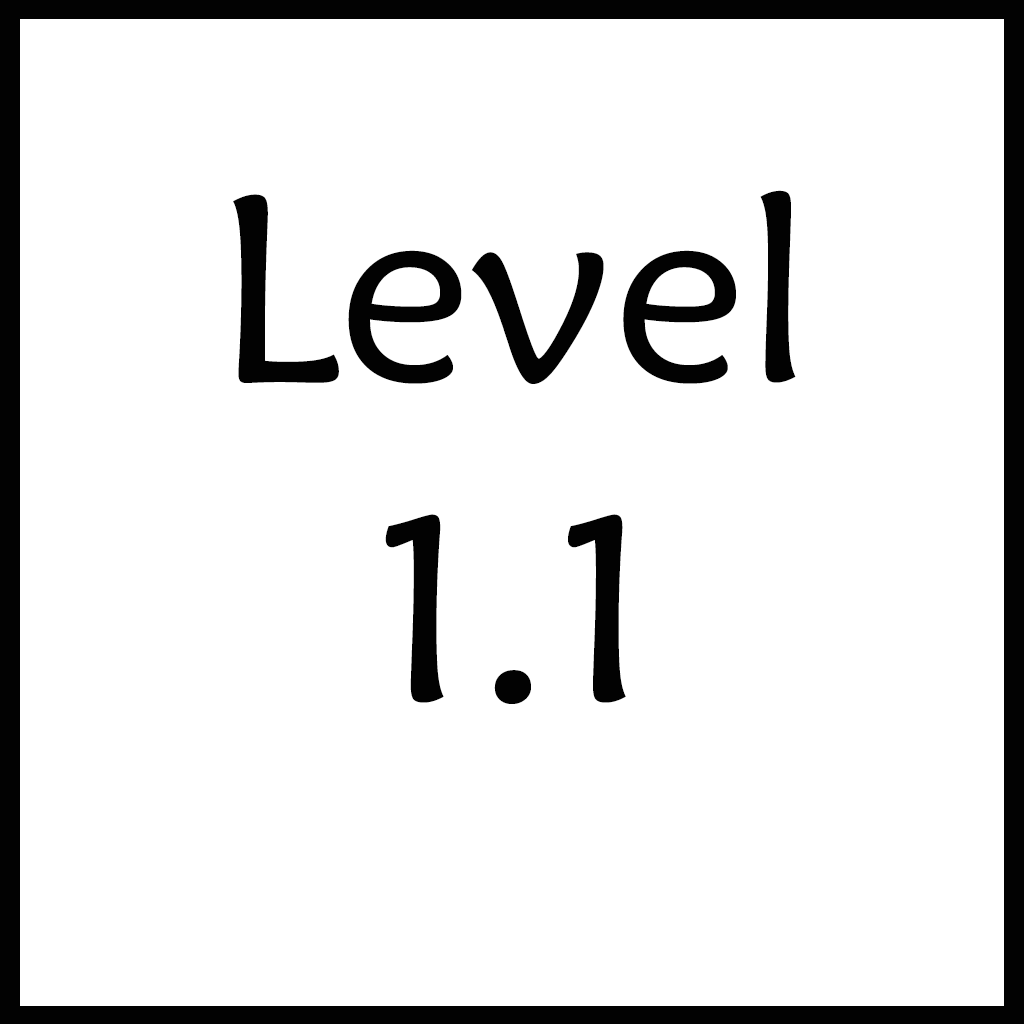
<style>
.page{position:relative;width:1024px;height:1024px;background:#ffffff}
.page>*{position:absolute;margin:0}
.t1{font:266.7px "MaiandraGD-Regular";color:#020202}
</style>
<div class="page">
<p class="t1" style="left:233px;top:190px;width:563px;height:514px;text-align:center">Level <br>1.1</p>
</div>
